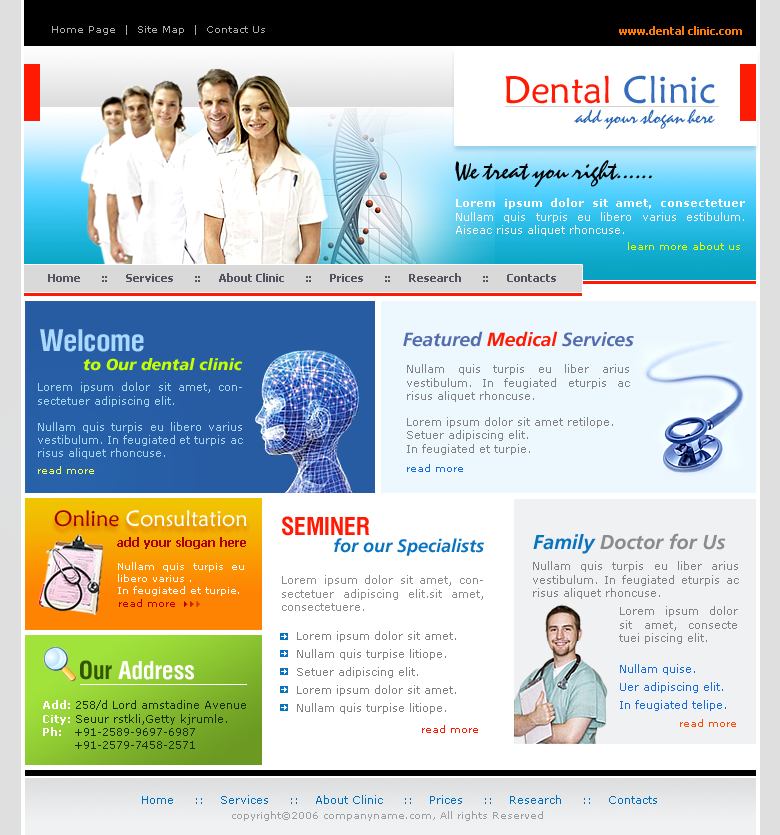
<style>
.page{position:relative;width:780px;height:835px;background:#ffffff}
.page>*{position:absolute;margin:0}
.t1{font:10px "Verdana";color:#adacac}
.t2{font:11px "Tahoma-Bold";color:#ff7a03}
.t3{font:38px "MaiandraGD-Regular";color:#ff1b03}
.t4{font:38px "MaiandraGD-Regular";color:#336dbb}
.t5{font:19px "Staccato222BT-Regular";color:#2663b6}
.t6{font:26px "Staccato222BT-Regular";color:#000000}
.t7{font:11px "Verdana";color:#ffffff}
.t8{font:11px "Verdana-Bold";color:#ffffff}
.t9{font:10px "Verdana";color:#e4ff00}
.t10{font:11px "Tahoma-Bold";color:#545460}
.t11{font:30px "HeliosCondBold";color:#aad8ff}
.t12{font:19px "AGForeignerLightBoldItalicBold";color:#556dad}
.t13{font:19px "AGForeignerLightBoldItalicBold";color:#ff1b03}
.t14{font:16px "AGForeignerBoldItalic";color:#c6ff00}
.t15{font:11px "Verdana";color:#818181}
.t16{font:10px/19px "Verdana";color:#176bdc}
.t17{font:11px "Verdana";color:#a5d3f3}
.t18{font:10px "Verdana";color:#f4fe4c}
.t19{font:22px "MaiandraGD-Regular";color:#ffffff}
.t20{font:22px "MaiandraGD-Regular";color:#a40000}
.t21{font:25px "HeliosCondBold";color:#ff1b03;text-transform:uppercase}
.t22{font:20px "AGForeignerLightBoldItalicBold";color:#8b8b8b}
.t23{font:20px "AGForeignerLightBoldItalicBold";color:#0973bf}
.t24{font:12px "Tahoma-Bold";color:#ad0000}
.t25{font:18px "AGForeignerLightBoldItalicBold";color:#0973bf}
.t26{font:10px "Verdana";color:#ffffff}
.t27{font:11px "Verdana";color:#8b8b8b}
.t28{font:10px "Verdana";color:#b10000}
.t29{font:11px/18px "Verdana";color:#176bdc}
.t30{font:10px/18px "Verdana";color:#ff4a03}
.t31{font:11px/18px "Verdana";color:#828080}
.t32{font:25px "HeliosCondBold";color:#ffffff}
.t33{font:25px "HeliosCondBold";color:#345500}
.t34{font:11px "Verdana";color:#1c2e00}
.t35{font:10px "Verdana";color:#ff1b03}
.t36{font:11px "Verdana";color:#ff1b03}
.t37{font:11px "Verdana";color:#006eba}
.t38{font:10px "Verdana";color:#9b9ea1}
</style>
<div class="page">
<p class="t1" style="left:52px;top:25px;width:213px;height:10px">Home Page  |  Site Map  |  Contact Us</p>
<p class="t2" style="left:619px;top:26px;width:123px;height:9px">www.dental clinic.com</p>
<p class="t3" style="left:505px;top:75px;width:210px;height:29px">Dental <span class="t4">Clinic</span></p>
<p class="t5" style="left:574px;top:109px;width:141px;height:20px">add your slogan here</p>
<p class="t6" style="left:455px;top:160px;width:197px;height:27px">We treat you right......</p>
<p class="t7" style="left:456px;top:198px;width:289px;height:38px;text-align:justify"><span class="t8">Lorem ipsum dolor sit amet, consectetuer </span> Nullam quis turpis eu libero varius estibulum. Aiseac risus aliquet rhoncuse.</p>
<p class="t9" style="left:628px;top:242px;width:112px;height:8px">learn more about us</p>
<p class="t10" style="left:48px;top:273px;width:508px;height:9px">Home       ::      Services       ::      About Clinic       ::      Prices       ::      Research       ::      Contacts</p>
<p class="t11" style="left:40px;top:329px;width:104px;height:23px">Welcome</p>
<p class="t12" style="left:403px;top:331px;width:231px;height:16px">Featured <span class="t13">Medical </span>Services</p>
<p class="t14" style="left:83px;top:358px;width:160px;height:13px">to Our dental clinic</p>
<p class="t15" style="left:407px;top:364px;width:223px;height:108px;text-align:justify">Nullam quis turpis eu liber arius vestibulum. In feugiated eturpis ac risus aliquet rhoncuse.<br><br>Lorem ipsum dolor sit amet retilope.<br>Setuer adipiscing elit.<br>In feugiated et turpie.<br><span class="t16">read more</span></p>
<p class="t17" style="left:38px;top:382px;width:205px;height:77px;text-align:justify">Lorem ipsum dolor sit amet, consectetuer adipiscing elit.<br><br>Nullam quis turpis eu libero varius vestibulum. In feugiated et turpis ac risus aliquet rhoncuse.</p>
<p class="t18" style="left:38px;top:466px;width:56px;height:8px">read more</p>
<p class="t19" style="left:54px;top:510px;width:193px;height:17px"><span class="t20">Online</span> Consultation</p>
<p class="t21" style="left:282px;top:516px;width:88px;height:20px">Seminer</p>
<p class="t22" style="left:533px;top:533px;width:193px;height:21px"><span class="t23">  Family </span>Doctor for Us</p>
<p class="t24" style="left:117px;top:537px;width:129px;height:12px">add your slogan here</p>
<p class="t25" style="left:334px;top:538px;width:150px;height:18px">for our Specialists</p>
<p class="t26" style="left:118px;top:562px;width:126px;height:34px;text-align:justify">Nullam quis turpis eu libero varius .<br>In feugiated et turpie.</p>
<p class="t15" style="left:533px;top:561px;width:206px;height:38px;text-align:justify">Nullam quis turpis eu liber arius vestibulum. In feugiated eturpis ac risus aliquet rhoncuse.</p>
<p class="t27" style="left:282px;top:575px;width:201px;height:36px;text-align:justify">Lorem ipsum dolor sit amet, consectetuer adipiscing elit.sit amet, consectetuere.</p>
<p class="t28" style="left:119px;top:599px;width:56px;height:8px">read more</p>
<p class="t15" style="left:619px;top:606px;width:119px;height:121px;text-align:justify">Lorem ipsum dolor sit amet, consecte tuei piscing elit. <br><br><span class="t29">Nullam quise.<br>Uer adipiscing elit.<br>In feugiated telipe.<br>               </span><span class="t30">read more</span></p>
<p class="t31" style="left:297px;top:631px;width:159px;height:83px;text-align:justify">Lorem ipsum dolor sit amet.<br>Nullam quis turpise litiope.<br>Setuer adipiscing elit.<br>Lorem ipsum dolor sit amet.<br>Nullam quis turpise litiope.</p>
<p class="t32" style="left:80px;top:660px;width:114px;height:20px"><span class="t33">Our </span>Address</p>
<p class="t34" style="left:43px;top:700px;width:203px;height:49px"><span class="t8">Add: </span>258/d Lord amstadine Avenue<br><span class="t8">City: </span>Seuur rstkli,Getty kjrumle.<br><span class="t8">Ph:   </span>+91-2589-9697-6987<br>        +91-2579-7458-2571</p>
<p class="t35" style="left:422px;top:725px;width:56px;height:8px"><span class="t36"> </span>read more</p>
<p class="t37" style="left:142px;top:795px;width:515px;height:9px">Home     ::    Services     ::    About Clinic     ::    Prices     ::    Research     ::    Contacts</p>
<p class="t38" style="left:232px;top:811px;width:311px;height:10px">copyright©2006 companyname.com, All rights Reserved</p>
</div>
